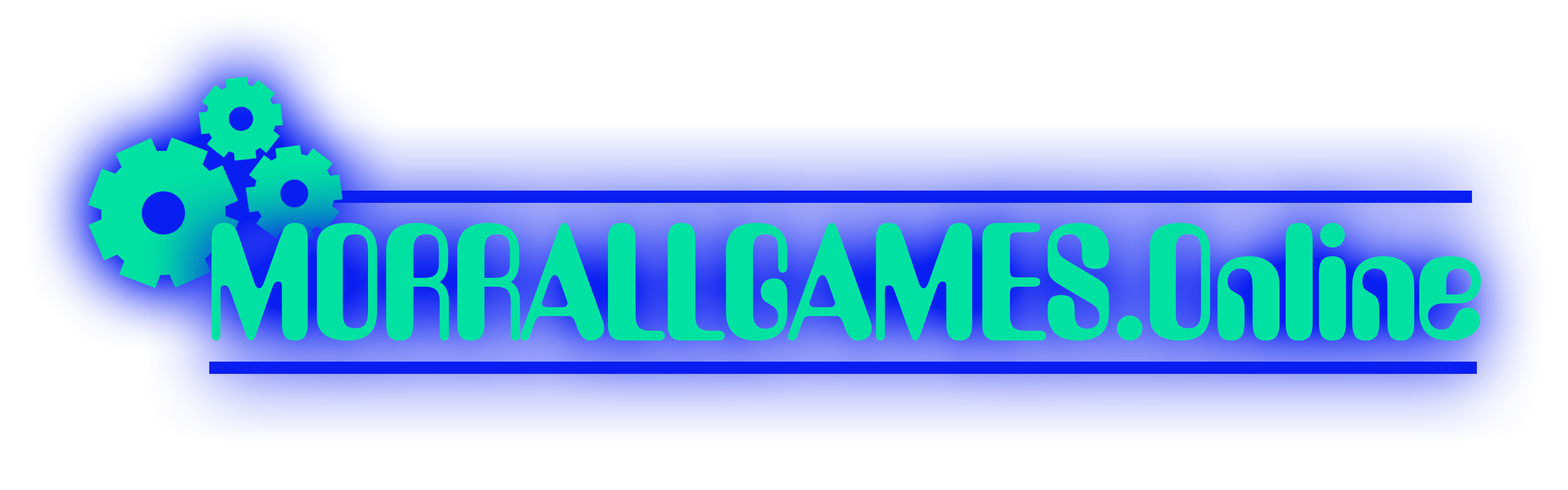
<style>
.page{position:relative;width:1568px;height:490px;background:#ffffff}
.page>*{position:absolute;margin:0}
.t1{font:161.1px "YellowSubmarine";letter-spacing:-0.02em;color:#01e2a2}
</style>
<div class="page">
<p class="t1" style="left:211px;top:223px;width:1270px;height:118px">MORRALLGAMES.Online</p>
</div>
